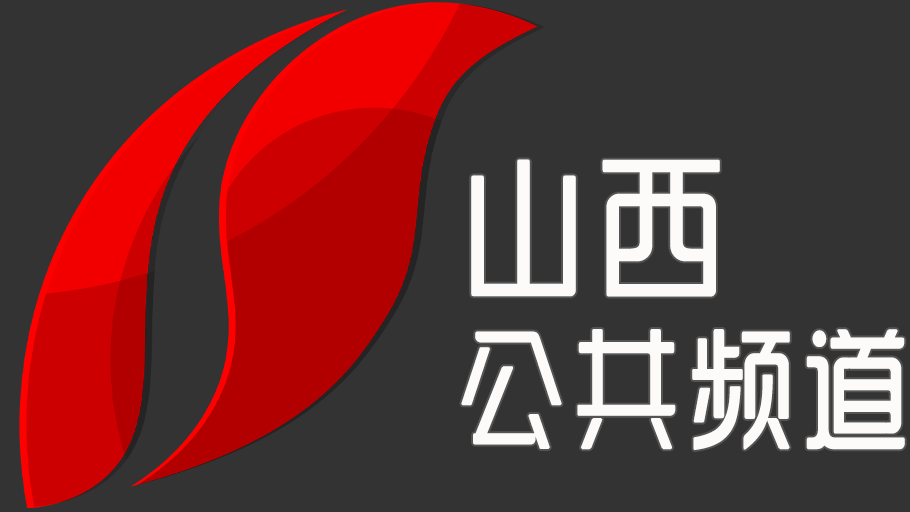
<style>
.page{position:relative;width:910px;height:512px;background:#333333}
.page>*{position:absolute;margin:0}
.t1{font:132px/170px "SJyunlvyuan";letter-spacing:0.02em;color:#fcfbf9;scale:0.85 1}
.t2{font:150px/170px "SJyunlvyuan";letter-spacing:0.02em;color:#fcfbf9;scale:0.9 1}
</style>
<div class="page">
<p class="t1" style="left:461px;top:159px;width:444px;height:291px"><span class="t2">山西<br></span>公共频道</p>
</div>
